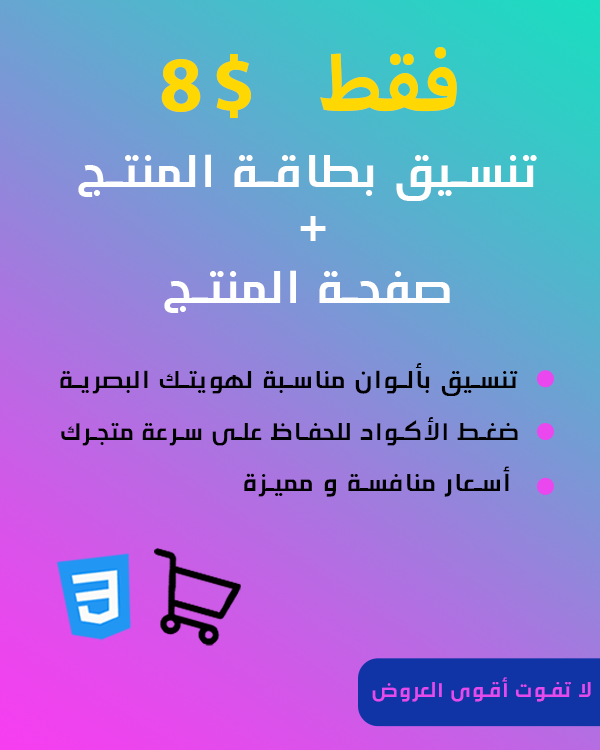
<style>
.page{position:relative;width:600px;height:750px}
.page>*{position:absolute;margin:0}
.t1{font:109.9px "MyriadArabic-Bold";letter-spacing:0.08em;color:#ffd803}
.t2{font:48.3px "ITCHandelGothicArabic-Bold";letter-spacing:0.08em;color:#ffffff}
.t3{font:26px "ITCHandelGothicArabic-Bold";letter-spacing:0.08em;color:#000000}
.t4{font:25.2px "ITCHandelGothicArabic-Bold";letter-spacing:0.08em;color:#000000}
.t5{font:25.9px "ITCHandelGothicArabic-Bold";letter-spacing:0.08em;color:#000000}
.t6{font:20.9px "ITCHandelGothicArabic-Bold";letter-spacing:0.08em;color:#e44aec}
</style>
<div class="page">
<p class="t1" style="left:161px;top:47px;width:296px;height:71px">8$ فقط</p>
<p class="t2" style="left:78px;top:154px;width:459px;height:159px;text-align:center">تنسيق بطاقة المنتج <br>+<br>صفحة المنتج</p>
<p class="t3" style="left:60px;top:363px;width:458px;height:33px">تنسيق بألوان مناسبة لهويتك البصرية</p>
<p class="t4" style="left:61px;top:417px;width:457px;height:29px">ضغط الأكواد للحفاظ على سرعة متجرك</p>
<p class="t5" style="left:244px;top:466px;width:266px;height:31px">أسعار منافسة و مميزة</p>
<p class="t6" style="left:372px;top:677px;width:219px;height:25px">لا تفوت أقوى العروض</p>
</div>
